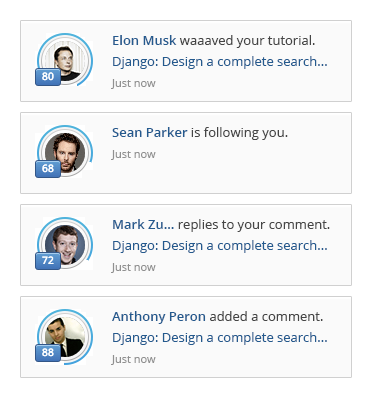
<style>
.page{position:relative;width:372px;height:398px;background:#fafafa}
.page>*{position:absolute;margin:0}
.t1{font:13px "OpenSans";color:#454545}
.t2{font:13px "OpenSans-Semibold";color:#245a8e}
.t3{font:13px "OpenSans";color:#245a8e}
.t4{font:11px "OpenSans";color:#909090}
</style>
<div class="page">
<p class="t1" style="left:113px;top:35px;width:202px;height:13px"><span class="t2">Elon Musk </span>waaaved your tutorial.</p>
<p class="t3" style="left:113px;top:56px;width:214px;height:13px">Django: Design a complete search...</p>
<p class="t4" style="left:111px;top:79px;width:45px;height:10px">Just now</p>
<p class="t1" style="left:112px;top:127px;width:176px;height:13px"><span class="t2">Sean Parker </span>is following you.</p>
<p class="t4" style="left:111px;top:150px;width:45px;height:10px">Just now</p>
<p class="t1" style="left:113px;top:219px;width:217px;height:13px"><span class="t2">Mark Zu... </span>replies to your comment.</p>
<p class="t3" style="left:113px;top:240px;width:214px;height:13px">Django: Design a complete search...</p>
<p class="t4" style="left:111px;top:263px;width:45px;height:10px">Just now</p>
<p class="t1" style="left:112px;top:311px;width:211px;height:13px"><span class="t2">Anthony Peron </span>added a comment.</p>
<p class="t3" style="left:113px;top:332px;width:214px;height:13px">Django: Design a complete search...</p>
<p class="t4" style="left:111px;top:355px;width:45px;height:10px">Just now</p>
</div>
